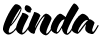
<style>
.page{position:relative;width:100px;height:40px;background:#ffffff}
.page>*{position:absolute;margin:0}
.t1{font:43px "FSZuliaPro";color:#000000}
</style>
<div class="page">
<p class="t1" style="left:3px;top:3px;width:96px;height:33px">linda</p>
</div>
